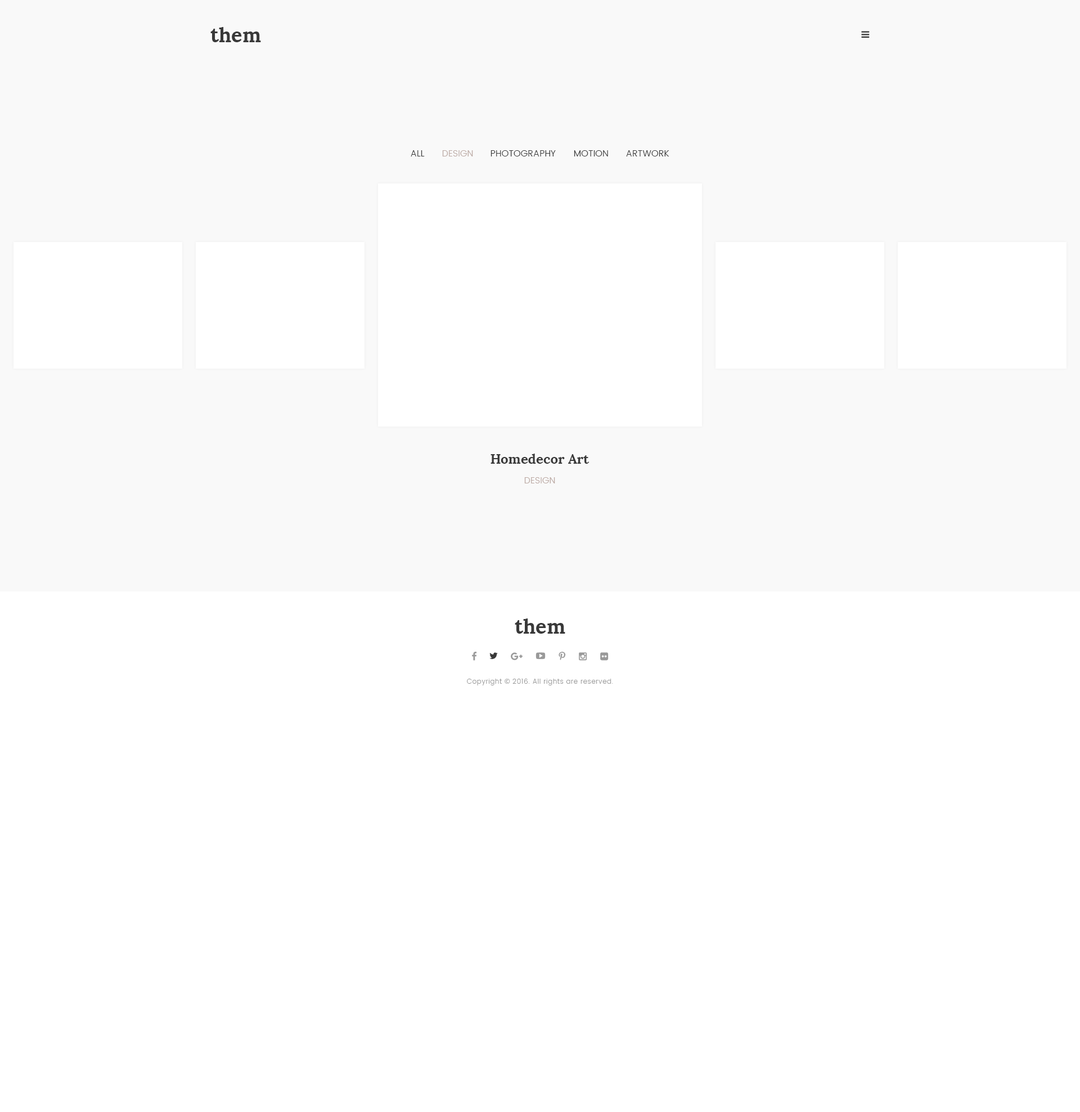
<style>
.page{position:relative;width:1080px;height:1112px;background:#ffffff}
.page>*{position:absolute;margin:0}
.t1{font:20.2px "Lora-Bold";color:#393939}
.t2{font:9px "Poppins-Light";letter-spacing:0.01em;color:#393939;text-transform:uppercase}
.t3{font:9px "Poppins-Light";letter-spacing:0.01em;color:#bcaaa4;text-transform:uppercase}
.t4{font:13.5px "Lora-Bold";color:#393939}
.t5{font:6.8px "Poppins-Light";letter-spacing:0.05em;color:#999999}
.t6{font:6.8px "OpenSans";letter-spacing:0.05em;color:#999999}
</style>
<div class="page">
<p class="t1" style="left:210px;top:27px;width:51px;height:15px">them</p>
<p class="t2" style="left:411px;top:150px;width:14px;height:6px">All</p>
<p class="t3" style="left:442px;top:150px;width:31px;height:6px">Design</p>
<p class="t2" style="left:490px;top:150px;width:66px;height:6px">Photography</p>
<p class="t2" style="left:574px;top:150px;width:34px;height:6px">Motion</p>
<p class="t2" style="left:626px;top:150px;width:43px;height:6px">Artwork</p>
<p class="t4" style="left:490px;top:453px;width:100px;height:11px">Homedecor Art</p>
<p class="t3" style="left:524px;top:477px;width:31px;height:6px">Design</p>
<p class="t1" style="left:515px;top:618px;width:50px;height:15px">them</p>
<p class="t5" style="left:467px;top:678px;width:146px;height:7px">Copyright <span class="t6">© </span>2016. All rights are reserved.</p>
</div>
